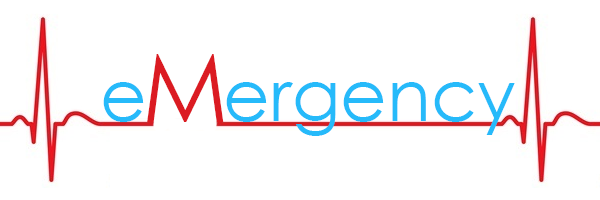
<style>
.page{position:relative;width:600px;height:200px;background:#ffffff}
.page>*{position:absolute;margin:0}
.t1{font:94px "CenturyGothic";color:#db1b22}
.t2{font:72px "CenturyGothic";color:#26bafa}
</style>
<div class="page">
<p class="t1" style="left:147px;top:54px;width:77px;height:68px">M</p>
<p class="t2" style="left:103px;top:82px;width:41px;height:40px">e</p>
<p class="t2" style="left:226px;top:82px;width:289px;height:54px">ergency</p>
</div>
